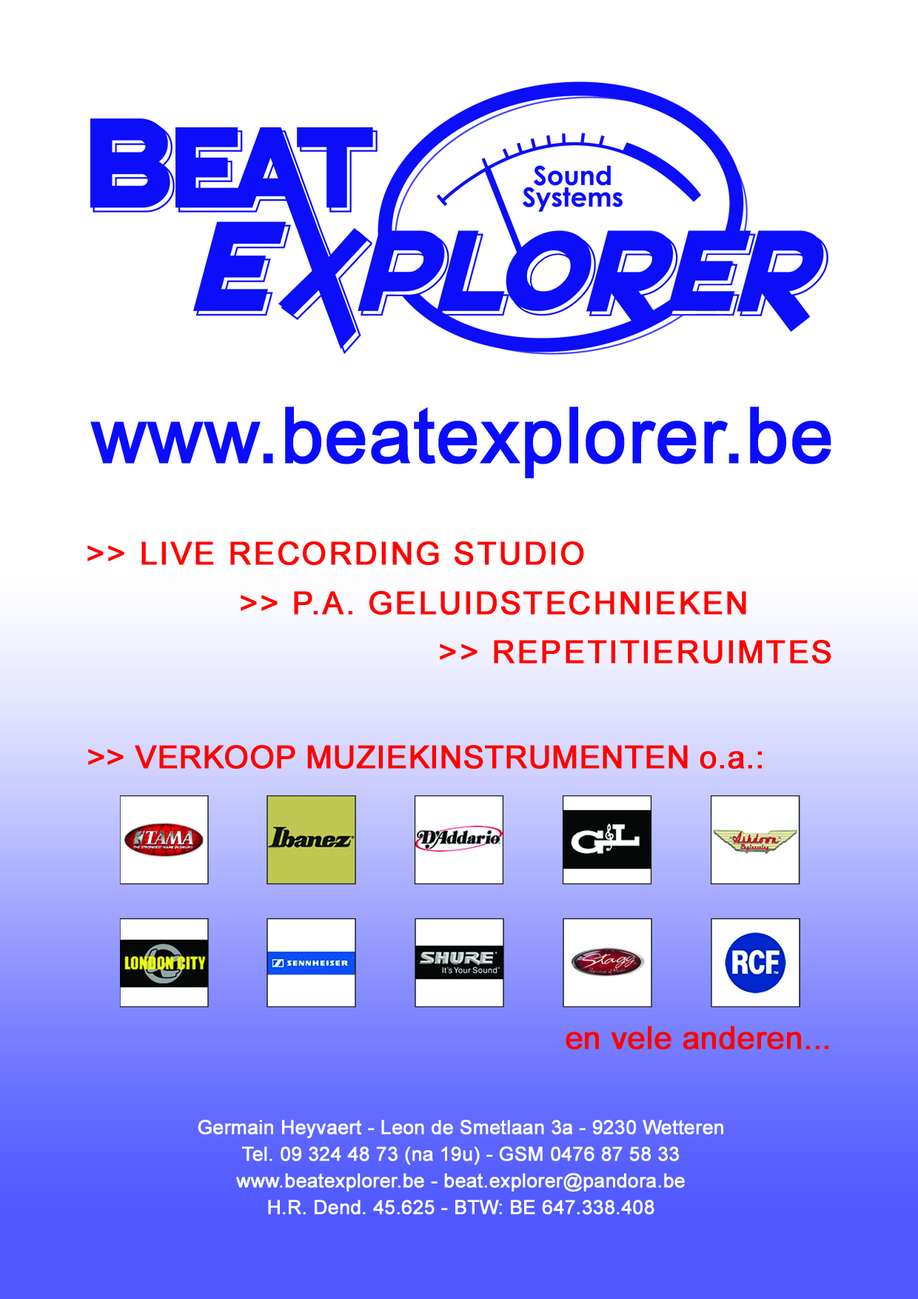
<style>
.page{position:relative;width:918px;height:1299px;background:#ffffff}
.page>*{position:absolute;margin:0}
.t1{font:75.9px "ArialMT";color:#0b0cff;font-weight:bold}
.t2{font:31.5px "ArialMT";letter-spacing:0.05em;color:#ff0200;font-weight:bold}
.t3{font:31.5px "ArialMT";color:#ff0200;font-weight:bold}
.t4{font:19.3px/26.7px "ArialMT";color:#ffffff;font-weight:bold}
</style>
<div class="page">
<p class="t1" style="left:90px;top:407px;width:742px;height:71px">www.beatexplorer.be</p>
<p class="t2" style="left:87px;top:541px;width:497px;height:24px">&gt;&gt; LIVE RECORDING STUDIO</p>
<p class="t2" style="left:241px;top:591px;width:505px;height:24px">&gt;&gt; P.A. GELUIDSTECHNIEKEN</p>
<p class="t2" style="left:440px;top:640px;width:392px;height:23px">&gt;&gt; REPETITIERUIMTES</p>
<p class="t3" style="left:88px;top:745px;width:674px;height:24px">&gt;&gt; VERKOOP MUZIEKINSTRUMENTEN o.a.:</p>
<p class="t3" style="left:566px;top:1026px;width:263px;height:23px">en vele anderen...</p>
<p class="t4" style="left:198px;top:1120px;width:525px;height:94px;text-align:center">Germain Heyvaert - Leon de Smetlaan 3a - 9230 Wetteren<br>Tel. 09 324 48 73 (na 19u) - GSM 0476 87 58 33<br>www.beatexplorer.be - beat.explorer@pandora.be<br>H.R. Dend. 45.625 - BTW: BE 647.338.408</p>
</div>
